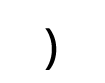
<style>
.page{position:relative;width:105px;height:83px;background:#ffffff}
.page>*{position:absolute;margin:0}
.t1{font:47.9px "DroidSans";color:#000000}
</style>
<div class="page">
<p class="t1" style="left:45px;top:28px;width:12px;height:42px">)</p>
</div>
